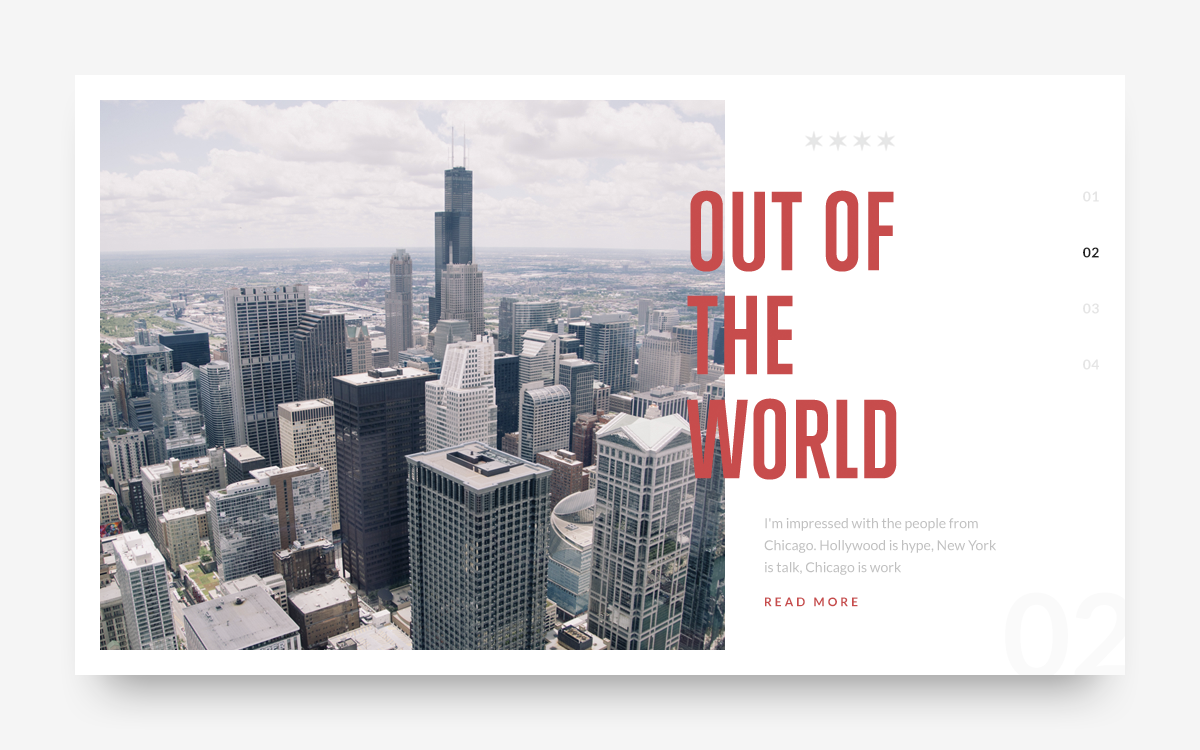
<style>
.page{position:relative;width:1200px;height:750px;background:#ffffff}
.page>*{position:absolute;margin:0}
.t1{font:102px/104px "TrumpGothicEast-Bold";letter-spacing:0.025em;color:#c74c4c;text-transform:uppercase}
.t2{font:14px "Lato-Bold";letter-spacing:0.025em;color:#202020;text-transform:uppercase}
.t3{font:14px "Lato-Bold";letter-spacing:0.025em;color:#000000;text-transform:uppercase}
.t4{font:14px/22px "Lato-Regular";color:#c0c0c0}
.t5{font:12px "Lato-Bold";letter-spacing:0.25em;color:#c74c4c;text-transform:uppercase}
</style>
<div class="page">
<p class="t1" style="left:687px;top:190px;width:210px;height:290px">Out of the world</p>
<p class="t2" style="left:1083px;top:247px;width:16px;height:11px"><span class="t3"><br></span>02</p>
<p class="t4" style="left:764px;top:518px;width:232px;height:57px">I'm impressed with the people from Chicago. Hollywood is hype, New York <br>is talk, Chicago is work</p>
<p class="t5" style="left:765px;top:597px;width:93px;height:10px">Read More</p>
</div>
